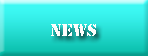
<style>
.page{position:relative;width:148px;height:56px}
.page>*{position:absolute;margin:0}
.t1{font:16px "StencilStd";color:#fcf6f6}
</style>
<div class="page">
<p class="t1" style="left:51px;top:24px;width:45px;height:12px">NEWS</p>
</div>
